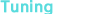
<style>
.page{position:relative;width:100px;height:14px;background:#ffffff}
.page>*{position:absolute;margin:0}
.t1{font:14.8px "RodinProN-DB";color:#59dbdd;font-weight:bold}
</style>
<div class="page">
<p class="t1" style="left:0px;top:0px;width:53px;height:16px">Tuning</p>
</div>
